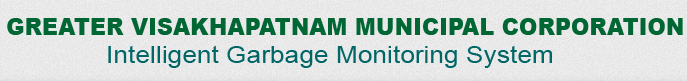
<style>
.page{position:relative;width:687px;height:81px}
.page>*{position:absolute;margin:0}
.t1{font:24px "Arial-Black";color:#006633;scale:0.93 1}
.t2{font:24px "ArialMT";color:#006666;scale:1.1 1}
</style>
<div class="page">
<p class="t1" style="left:7px;top:18px;width:676px;height:17px">GREATER VISAKHAPATNAM MUNICIPAL CORPORATION</p>
<p class="t2" style="left:108px;top:45px;width:444px;height:23px">Intelligent Garbage Monitoring System</p>
</div>
